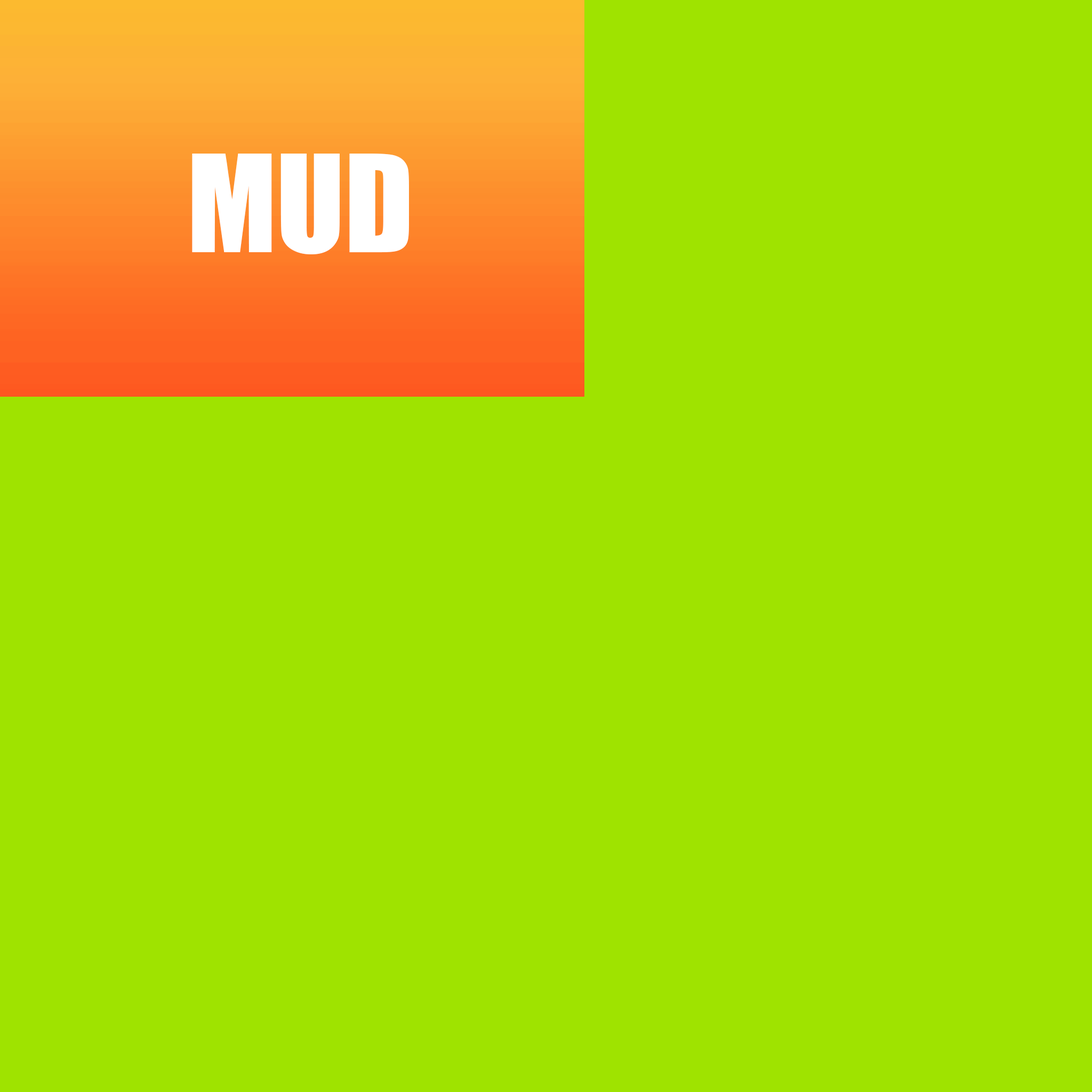
<style>
.page{position:relative;width:1092px;height:1092px;background:#9fe300}
.page>*{position:absolute;margin:0}
.t1{font:124.8px "Impact";color:#ffffff}
</style>
<div class="page">
<p class="t1" style="left:192px;top:154px;width:217px;height:100px">MUD</p>
</div>
